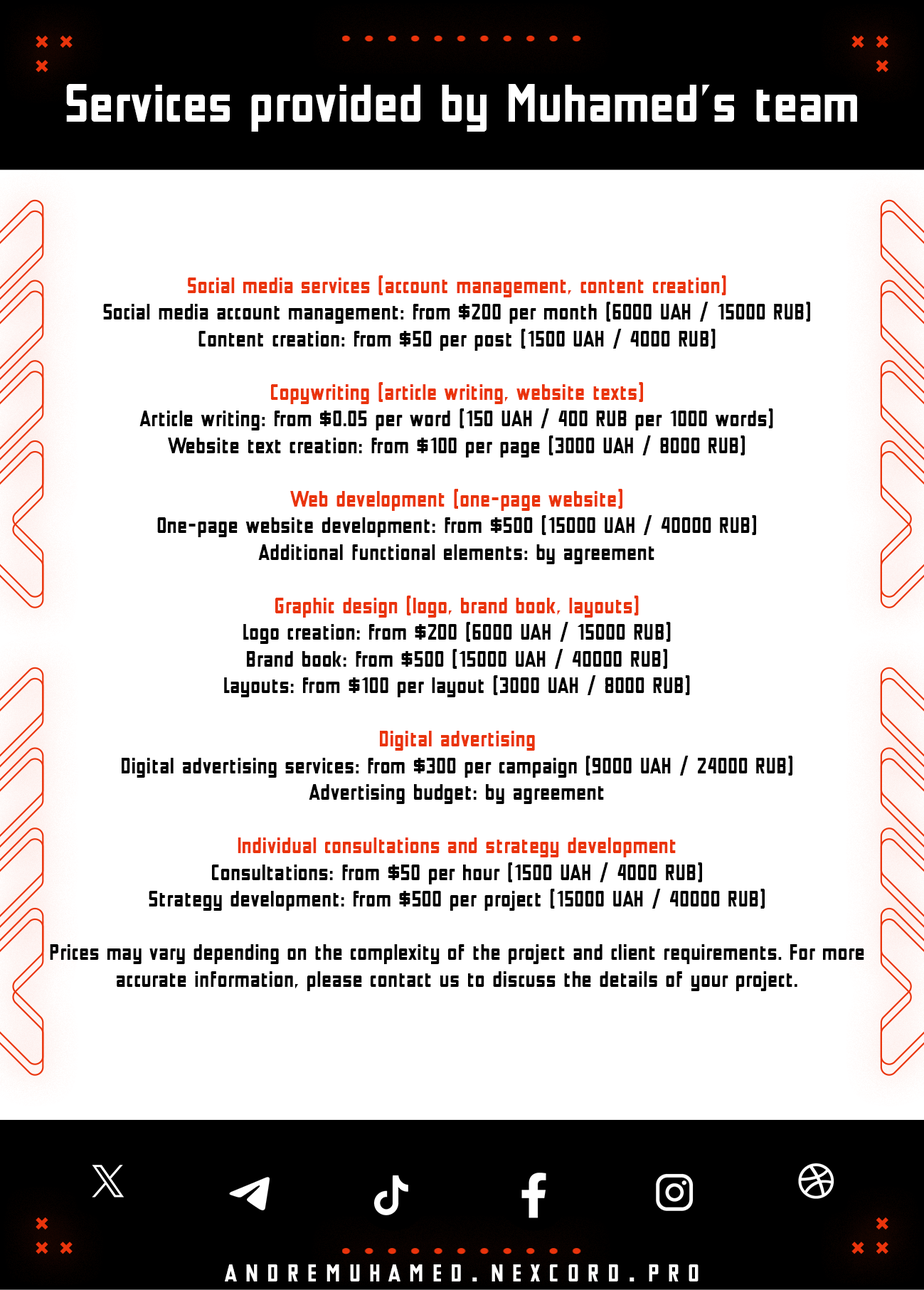
<style>
.page{position:relative;width:924px;height:1290px;background:#ffffff}
.page>*{position:absolute;margin:0}
.t1{font:53.4px "Tschichold-Bold";color:#ffffff}
.t2{font:22.2px "Tschichold-Bold";color:#000000}
.t3{font:22.2px "Tschichold-Bold";color:#ea340c}
.t4{font:34.1px "Tschichold-Bold";letter-spacing:0.365em;color:#ffffff;font-variant:small-caps}
</style>
<div class="page">
<p class="t1" style="left:66px;top:84px;width:791px;height:48px">Services provided by Muhamed's team</p>
<p class="t2" style="left:50px;top:275px;width:815px;height:716px;text-align:justify"><span class="t3">Social media services (account management, content creation)<br></span>Social media account management: from $200 per month (6000 UAH / 15000 RUB)<br>Content creation: from $50 per post (1500 UAH / 4000 RUB)<br><span class="t3"><br>Copywriting (article writing, website texts)<br></span>Article writing: from $0.05 per word (150 UAH / 400 RUB per 1000 words)<br>Website text creation: from $100 per page (3000 UAH / 8000 RUB)<br><span class="t3"><br>Web development (one-page website)<br></span>One-page website development: from $500 (15000 UAH / 40000 RUB)<br>Additional functional elements: by agreement<br><span class="t3"><br>Graphic design (logo, brand book, layouts)<br></span>Logo creation: from $200 (6000 UAH / 15000 RUB)<br>Brand book: from $500 (15000 UAH / 40000 RUB)<br>Layouts: from $100 per layout (3000 UAH / 8000 RUB)<br><span class="t3"><br>Digital advertising<br></span>Digital advertising services: from $300 per campaign (9000 UAH / 24000 RUB)<br>Advertising budget: by agreement<br><span class="t3"><br>Individual consultations and strategy development<br></span>Consultations: from $50 per hour (1500 UAH / 4000 RUB)<br>Strategy development: from $500 per project (15000 UAH / 40000 RUB)<br><br>Prices may vary depending on the complexity of the project and client requirements. For more accurate information, please contact us to discuss the details of your project.</p>
<p class="t4" style="left:225px;top:1264px;width:474px;height:18px">andremuhamed.nexcord.pro</p>
</div>
